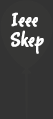
<style>
.page{position:relative;width:53px;height:119px;background:#333333}
.page>*{position:absolute;margin:0}
.t1{font:24.2px/20px "Romy";color:#ffffff;font-weight:bold;scale:0.88 1}
</style>
<div class="page">
<p class="t1" style="left:10px;top:12px;width:34px;height:42px;text-align:center">Ieee <br>Skep</p>
</div>
